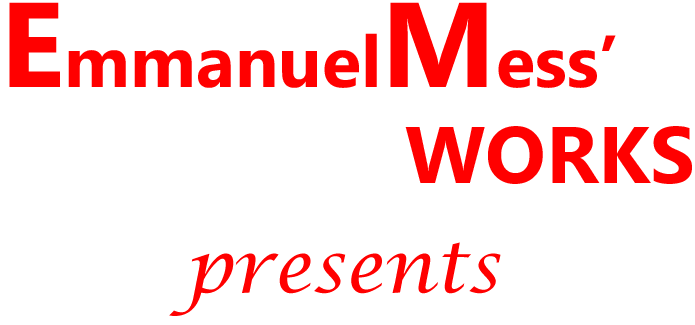
<style>
.page{position:relative;width:695px;height:325px;background:#ffffff}
.page>*{position:absolute;margin:0}
.t1{font:72px "MicrosoftPhagsPa-Bold";color:#ff0000}
.t2{font:120px "MicrosoftPhagsPa-Bold";color:#ff0000}
.t3{font:80px "MicrosoftPhagsPa-Bold";color:#ff0000}
.t4{font:72px "LucidaCalligraphy-Italic";color:#ff0000}
</style>
<div class="page">
<p class="t1" style="left:9px;top:2px;width:683px;height:182px"><span class="t2">E</span>mmanuel<span class="t2">M</span>ess’<br><span class="t3">WORKS</span></p>
<p class="t4" style="left:169px;top:242px;width:332px;height:74px">presents</p>
</div>
